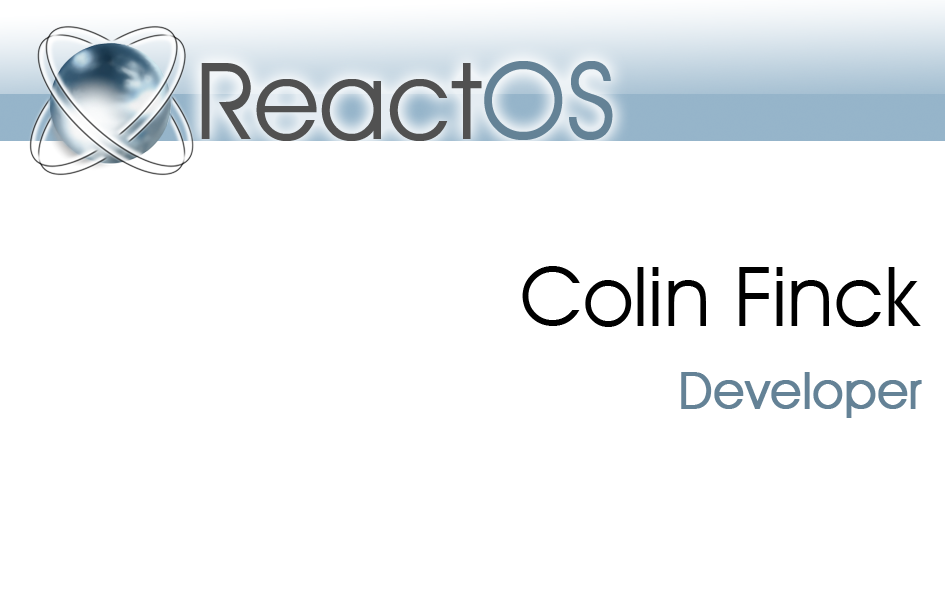
<style>
.page{position:relative;width:945px;height:591px;background:#ffffff}
.page>*{position:absolute;margin:0}
.t1{font:83.3px "AvantGardeITCbyBT-Book";color:#000000}
.t2{font:50px "AvantGardeITCbyBT-Book";color:#648296;font-weight:bold}
</style>
<div class="page">
<p class="t1" style="left:522px;top:266px;width:399px;height:61px">Colin Finck</p>
<p class="t2" style="left:681px;top:372px;width:241px;height:46px">Developer</p>
</div>
